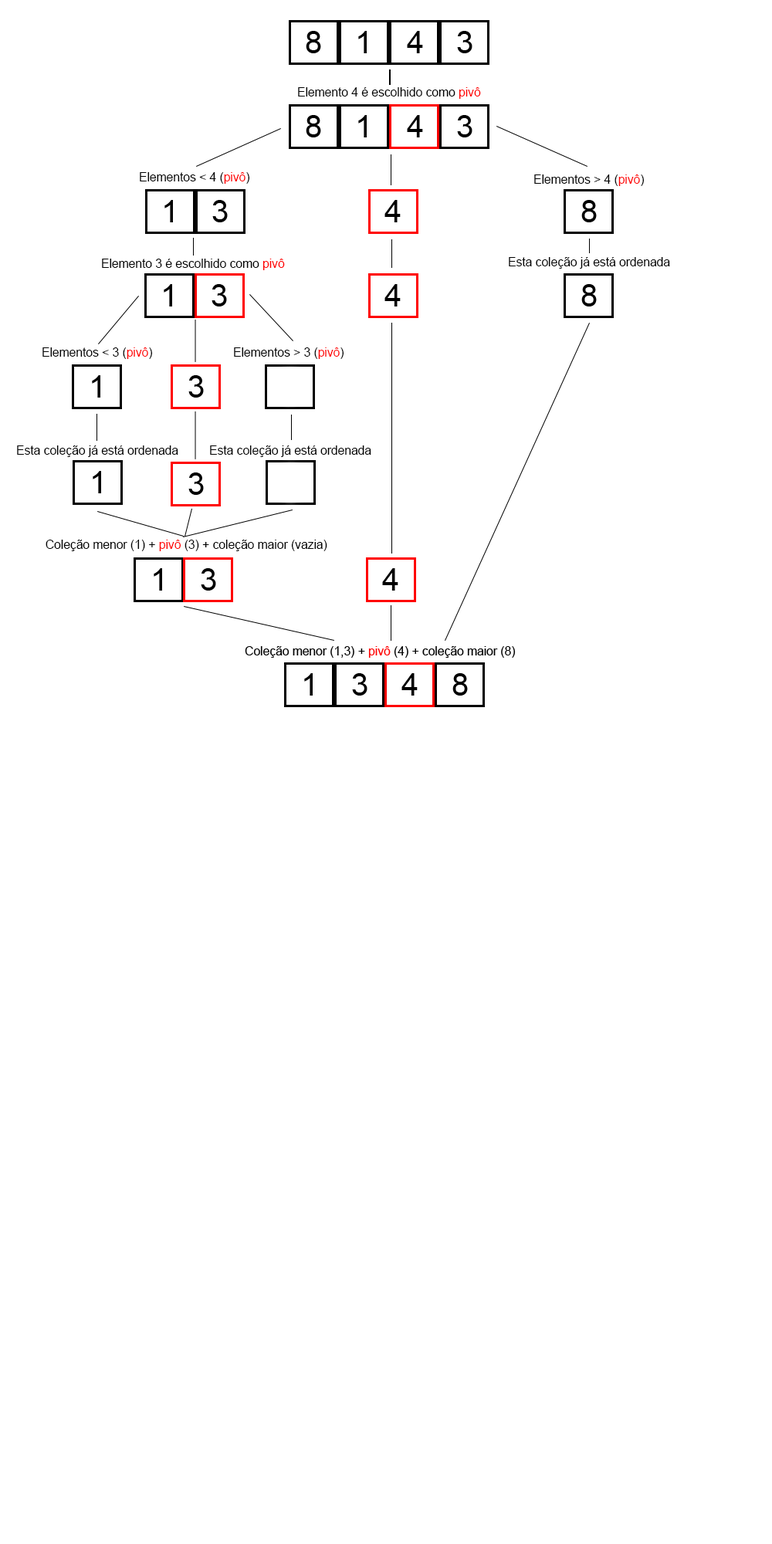
<style>
.page{position:relative;width:772px;height:1544px;background:#ffffff}
.page>*{position:absolute;margin:0}
.t1{font:12.4px "ArialMT";color:#000000}
.t2{font:12.4px "ArialMT";color:#ff0000}
</style>
<div class="page">
<p class="t1" style="left:298px;top:87px;width:183px;height:12px">Elemento 4 é escolhido como <span class="t2">pivô</span></p>
<p class="t1" style="left:140px;top:172px;width:110px;height:12px">Elementos &lt; 4 (<span class="t2">pivô</span>)</p>
<p class="t1" style="left:534px;top:175px;width:111px;height:11px">Elementos &gt; 4 (<span class="t2">pivô</span>)</p>
<p class="t1" style="left:509px;top:257px;width:161px;height:12px">Esta coleção já está ordenada</p>
<p class="t1" style="left:102px;top:259px;width:183px;height:11px">Elemento 3 é escolhido como <span class="t2">pivô</span></p>
<p class="t1" style="left:42px;top:347px;width:111px;height:12px">Elementos &lt; 3 (<span class="t2">pivô</span>)</p>
<p class="t1" style="left:234px;top:347px;width:110px;height:12px">Elementos &gt; 3 (<span class="t2">pivô</span>)</p>
<p class="t1" style="left:17px;top:446px;width:161px;height:11px">Esta coleção já está ordenada</p>
<p class="t1" style="left:210px;top:446px;width:161px;height:11px">Esta coleção já está ordenada</p>
<p class="t1" style="left:46px;top:540px;width:281px;height:11px">Coleção menor (1) + <span class="t2">pivô </span>(3) + coleção maior (vazia)</p>
</div>
